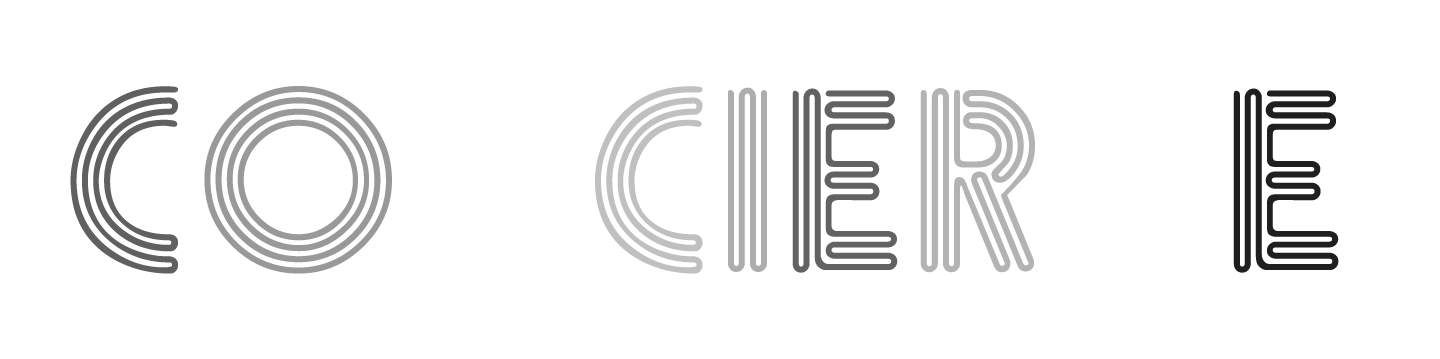
<style>
.page{position:relative;width:1440px;height:359px;background:#ffffff}
.page>*{position:absolute;margin:0}
.t1{font:240px "NeonFont";color:#616060}
.t2{font:240px "NeonFont";color:#999999}
.t3{font:240px "NeonFont";color:#ffffff}
.t4{font:240px "NeonFont";color:#c0c0c0}
.t5{font:240px "NeonFont";color:#adadad}
.t6{font:240px "NeonFont";color:#626262}
.t7{font:240px "NeonFont";color:#b3b3b3}
.t8{font:240px "NeonFont";color:#201f1f}
</style>
<div class="page">
<p class="t1" style="left:70px;top:86px;width:1269px;height:188px">c<span class="t2">o</span><span class="t3">n</span><span class="t4">c</span><span class="t5">i</span><span class="t6">e</span><span class="t7">r</span><span class="t3">g</span><span class="t8">e</span></p>
</div>
